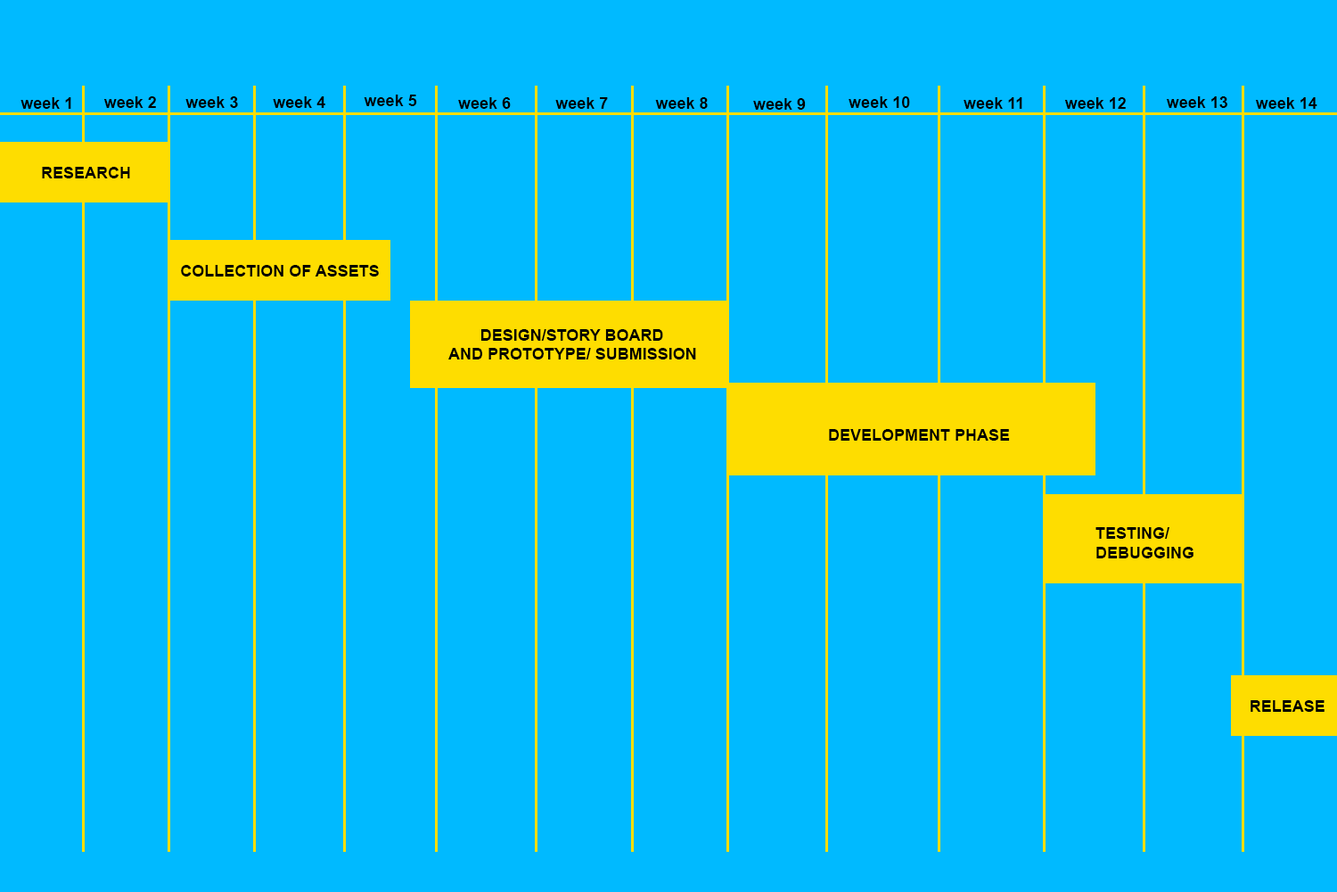
<style>
.page{position:relative;width:1337px;height:892px;background:#00baff}
.page>*{position:absolute;margin:0}
.t1{font:16px "Arial-BoldMT";color:#000000}
.t2{font:16px "Arial-BoldMT";color:#010101}
</style>
<div class="page">
<p class="t1" style="left:21px;top:97px;width:50px;height:12px">week 1</p>
<p class="t1" style="left:103px;top:96px;width:53px;height:12px">week 2</p>
<p class="t1" style="left:185px;top:96px;width:53px;height:12px">week 3</p>
<p class="t1" style="left:273px;top:96px;width:52px;height:12px">week 4</p>
<p class="t1" style="left:364px;top:95px;width:53px;height:11px">week 5</p>
<p class="t1" style="left:458px;top:97px;width:53px;height:12px">week 6</p>
<p class="t1" style="left:555px;top:97px;width:53px;height:12px">week 7</p>
<p class="t1" style="left:655px;top:97px;width:53px;height:12px">week 8</p>
<p class="t1" style="left:753px;top:98px;width:53px;height:12px">week 9</p>
<p class="t1" style="left:849px;top:96px;width:61px;height:12px">week 10</p>
<p class="t1" style="left:964px;top:97px;width:59px;height:12px">week 11</p>
<p class="t1" style="left:1065px;top:97px;width:61px;height:12px">week 12</p>
<p class="t1" style="left:1166px;top:96px;width:62px;height:12px">week 13</p>
<p class="t2" style="left:1255px;top:97px;width:63px;height:12px">week 14</p>
<p class="t1" style="left:42px;top:167px;width:88px;height:11px">RESEARCH</p>
<p class="t1" style="left:181px;top:265px;width:198px;height:11px">COLLECTION OF ASSETS</p>
<p class="t1" style="left:448px;top:329px;width:248px;height:30px">DESIGN/STORY BOARD<br> AND PROTOTYPE/ SUBMISSION</p>
<p class="t1" style="left:829px;top:429px;width:181px;height:11px">DEVELOPMENT PHASE</p>
<p class="t1" style="left:1096px;top:527px;width:98px;height:31px">TESTING/<br>DEBUGGING</p>
<p class="t1" style="left:1251px;top:700px;width:74px;height:11px">RELEASE</p>
</div>
